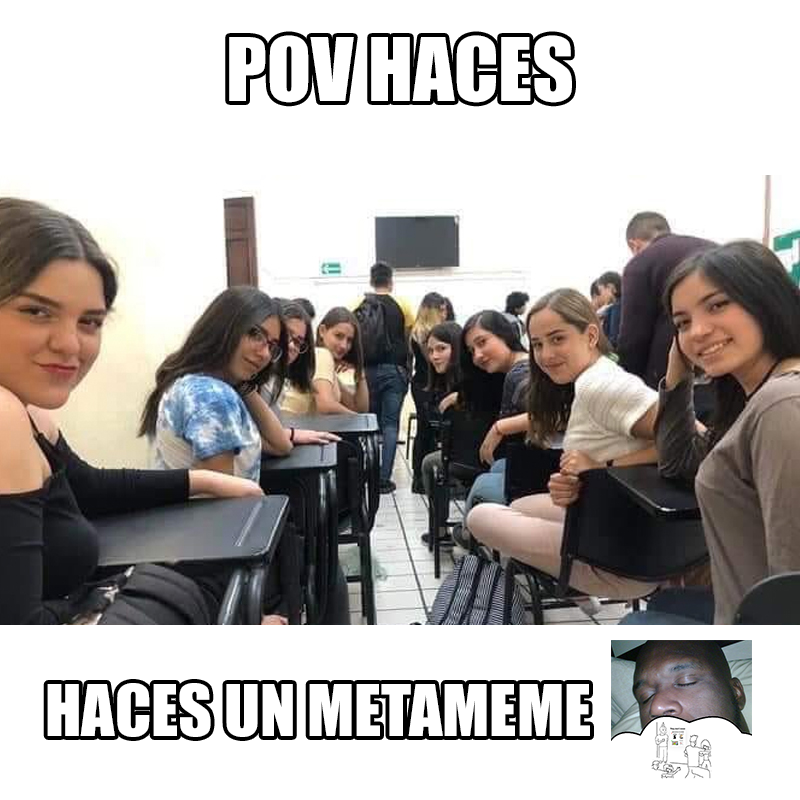
<style>
.page{position:relative;width:800px;height:800px;background:#ffffff}
.page>*{position:absolute;margin:0}
.t1{font:80.9px "Impact";color:#ffffff}
.t2{font:65.6px "Impact";color:#ffffff}
</style>
<div class="page">
<p class="t1" style="left:229px;top:35px;width:343px;height:68px">POV HACES</p>
<p class="t2" style="left:47px;top:683px;width:543px;height:54px">HACES UN METAMEME</p>
</div>
